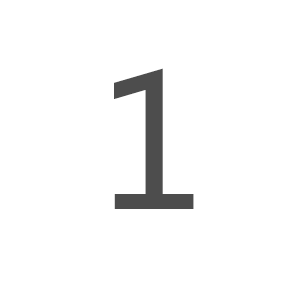
<style>
.page{position:relative;width:300px;height:300px;background:#ffffff}
.page>*{position:absolute;margin:0}
.t1{font:181.5px "MicrosoftYaHei";letter-spacing:-0.05em;color:#4d4d4d}
</style>
<div class="page">
<p class="t1" style="left:114px;top:68px;width:80px;height:141px">1</p>
</div>
